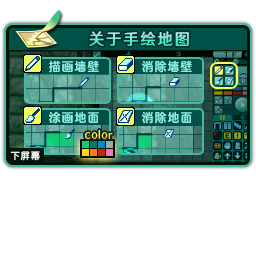
<style>
.page{position:relative;width:256px;height:256px;background:#ffffff}
.page>*{position:absolute;margin:0}
.t1{font:16px "HYWenHei-FEW";letter-spacing:0.105em;scale:0.97 1}
.t2{font:12px "FZFW-QingYinTiS-B--GB1-0";letter-spacing:0.105em;color:#8aeee1;scale:0.97 1}
.t3{font:9.3px "FZY3--GB1-4";letter-spacing:0.105em;color:#ffffff;scale:0.97 1}
</style>
<div class="page">
<p class="t1" style="left:89px;top:31px;width:100px;height:15px">关于手绘地图</p>
<p class="t2" style="left:49px;top:60px;width:50px;height:13px">描画墙壁</p>
<p class="t2" style="left:142px;top:60px;width:50px;height:13px">消除墙壁</p>
<p class="t2" style="left:49px;top:111px;width:50px;height:13px">涂画地面</p>
<p class="t2" style="left:142px;top:111px;width:50px;height:13px">消除地面</p>
<p class="t3" style="left:10px;top:151px;width:30px;height:10px">下屏幕</p>
</div>
